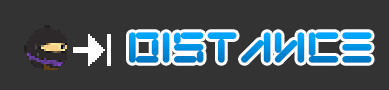
<style>
.page{position:relative;width:389px;height:90px;background:#333333}
.page>*{position:absolute;margin:0}
.t1{font:43.4px "LOXO"}
</style>
<div class="page">
<p class="t1" style="left:129px;top:32px;width:243px;height:31px">Distance</p>
</div>
